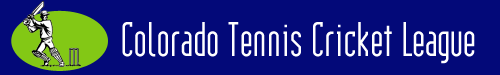
<style>
.page{position:relative;width:500px;height:75px;background:#030979}
.page>*{position:absolute;margin:0}
.t1{font:48px "Institution";color:#ffffff}
</style>
<div class="page">
<p class="t1" style="left:122px;top:22px;width:353px;height:42px">Colorado Tennis Cricket League</p>
</div>
